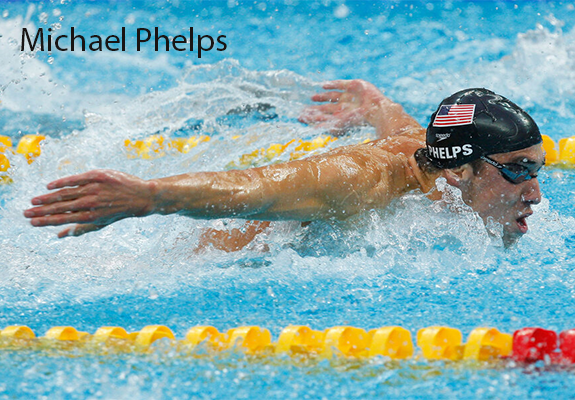
<style>
.page{position:relative;width:575px;height:400px}
.page>*{position:absolute;margin:0}
.t1{font:33.3px "MyriadPro-Regular";color:#181413}
</style>
<div class="page">
<p class="t1" style="left:21px;top:27px;width:206px;height:31px">Michael Phelps</p>
</div>
